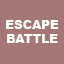
<style>
.page{position:relative;width:64px;height:64px;background:#a67575}
.page>*{position:absolute;margin:0}
.t1{font:12px "Arial-Black";color:#ffffff}
</style>
<div class="page">
<p class="t1" style="left:6px;top:20px;width:53px;height:23px;text-align:center">ESCAPE<br>BATTLE</p>
</div>
